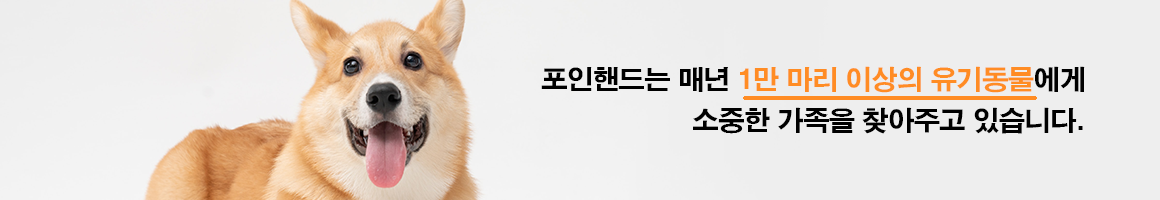
<style>
.page{position:relative;width:1160px;height:200px;background:#eeeeee}
.page>*{position:absolute;margin:0}
.t1{font:26.8px/40.2px "H2gtrE";letter-spacing:-0.04em;color:#000000}
.t2{font:26.8px/40.2px "H2gtrE";letter-spacing:-0.04em;color:#ff8c24}
</style>
<div class="page">
<p class="t1" style="left:541px;top:66px;width:544px;height:68px;text-align:right">포인핸드는 매년 <span class="t2">1만 마리 이상의 유기동물</span>에게<br>소중한 가족을 찾아주고 있습니다.</p>
</div>
